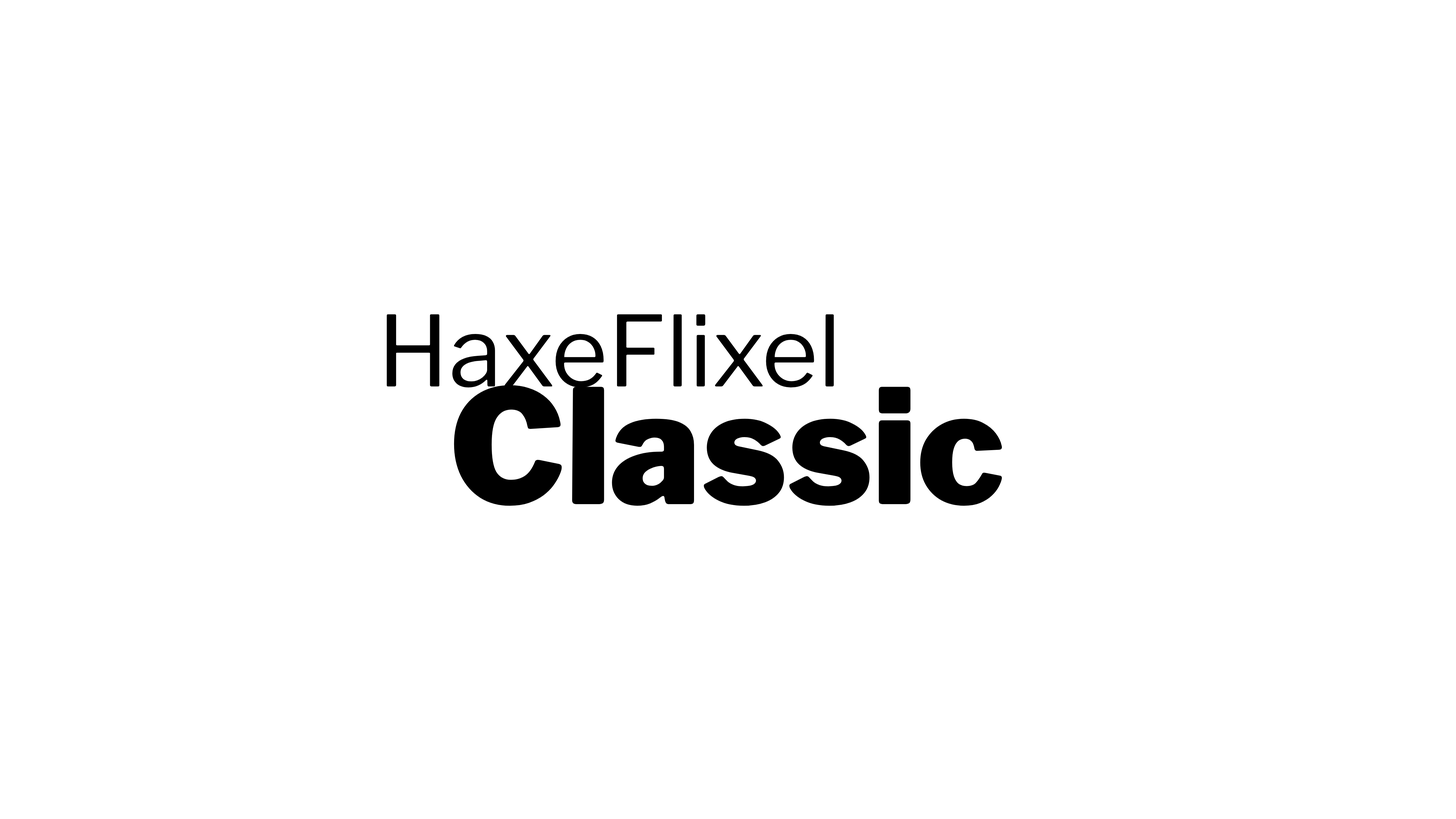
<style>
.page{position:relative;width:1456px;height:819px;background:#ffffff}
.page>*{position:absolute;margin:0}
.t1{font:97.1px "LibreFranklin-Regular";color:#000000}
.t2{font:158.1px "LibreFranklin-Black";color:#000000}
</style>
<div class="page">
<p class="t1" style="left:387px;top:314px;width:447px;height:74px">HaxeFlixel</p>
<p class="t2" style="left:454px;top:385px;width:548px;height:121px">Classic</p>
</div>
